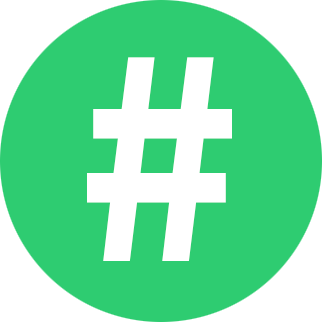
<style>
.page{position:relative;width:322px;height:322px;background:#2ecc71}
.page>*{position:absolute;margin:0}
.t1{font:313px "SourceSansPro-Bold";color:#ffffff}
</style>
<div class="page">
<p class="t1" style="left:87px;top:57px;width:145px;height:204px">#</p>
</div>
